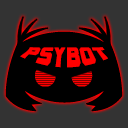
<style>
.page{position:relative;width:128px;height:128px;background:#333333}
.page>*{position:absolute;margin:0}
.t1{font:18px "Cyberfall";color:#ff0000}
</style>
<div class="page">
<p class="t1" style="left:20px;top:47px;width:88px;height:21px">psybot</p>
</div>
